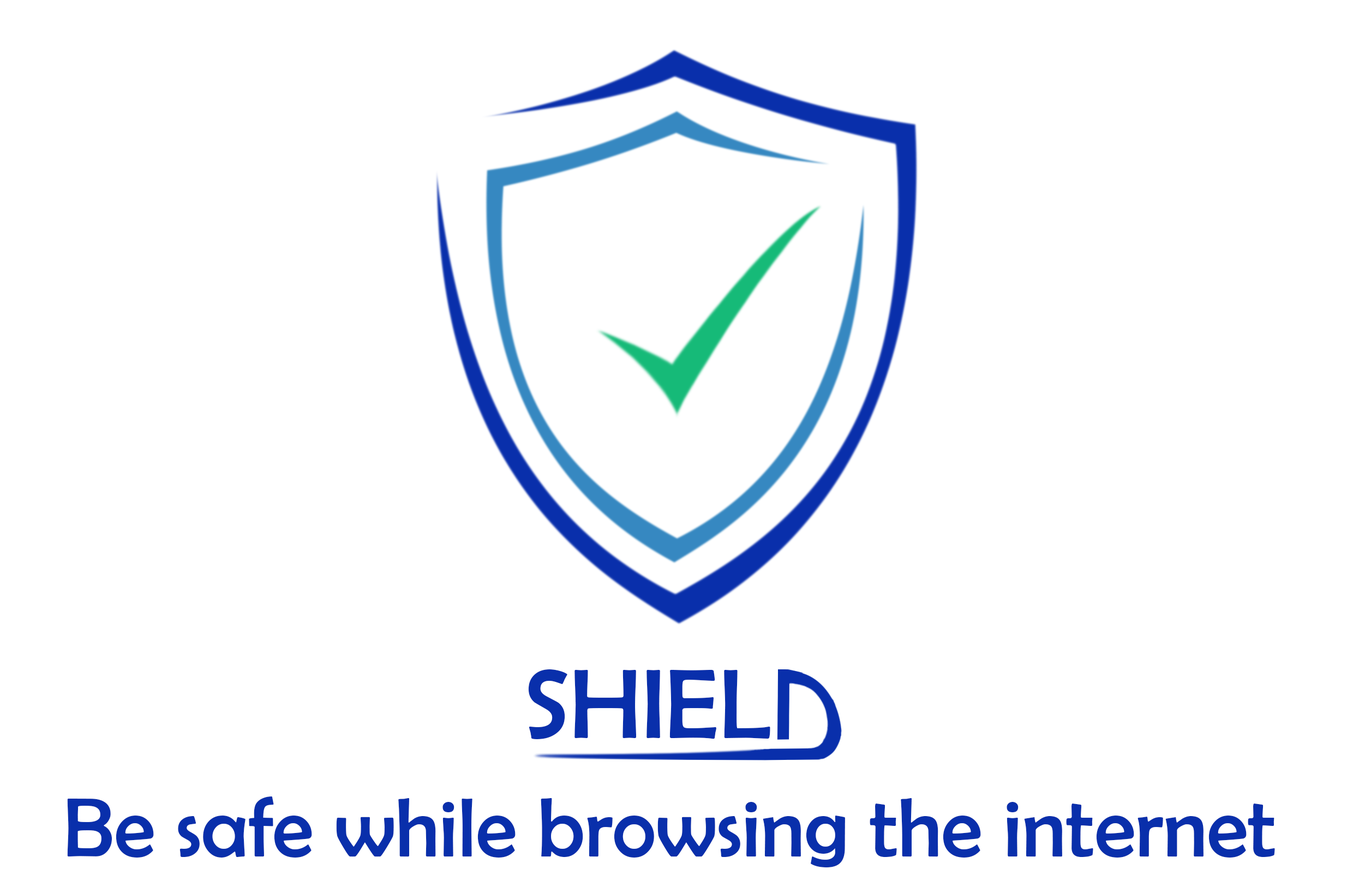
<style>
.page{position:relative;width:1353px;height:881px;background:#ffffff}
.page>*{position:absolute;margin:0}
.t1{font:100px "BerlinSansFB-Reg";color:#092fab}
.t2{font:84.1px "BerlinSansFB-Reg";color:#092fab}
</style>
<div class="page">
<p class="t1" style="left:528px;top:669px;width:242px;height:70px">SHIEL</p>
<p class="t2" style="left:67px;top:797px;width:1208px;height:71px">Be safe while browsing the internet</p>
</div>
